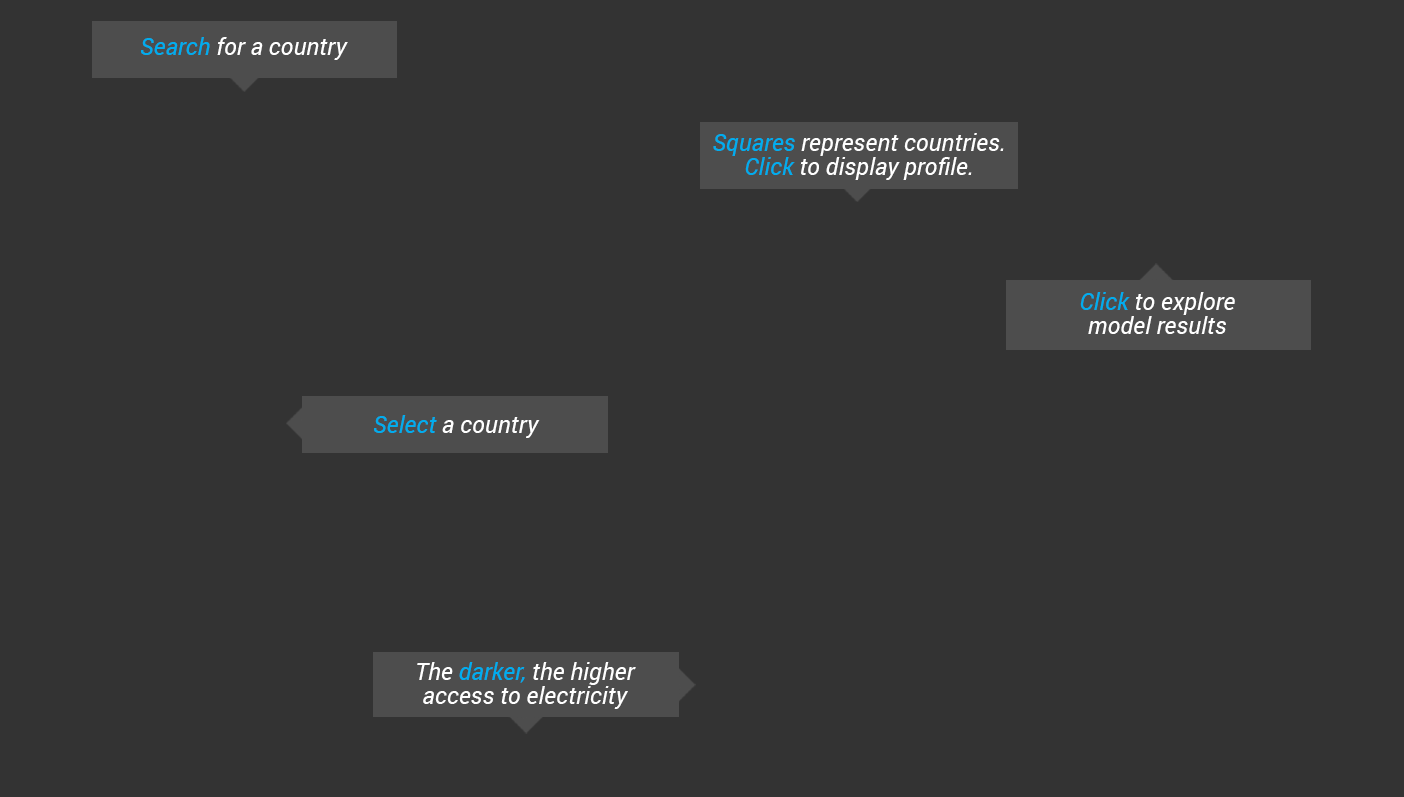
<style>
.page{position:relative;width:1404px;height:797px;background:#333333}
.page>*{position:absolute;margin:0}
.t1{font:24px "Roboto-Italic";color:#ffffff}
.t2{font:24px "Roboto-Italic";color:#00adef}
.t3{font:24px/24px "Roboto-Italic";color:#ffffff}
.t4{font:24px/24px "Roboto-Italic";color:#00adef}
</style>
<div class="page">
<p class="t1" style="left:141px;top:37px;width:207px;height:23px"><span class="t2">Search</span> for a country</p>
<p class="t3" style="left:713px;top:133px;width:291px;height:47px;text-align:center"><span class="t4">Squares</span> represent countries.<br><span class="t4">Click</span> to display profile.</p>
<p class="t3" style="left:1080px;top:292px;width:155px;height:42px;text-align:center"><span class="t4">Click</span> to explore<br>model results</p>
<p class="t1" style="left:374px;top:415px;width:166px;height:23px"><span class="t2">Select</span> a country</p>
<p class="t3" style="left:417px;top:662px;width:219px;height:47px;text-align:center">The<span class="t4"> darker,</span> the higher<br>access to electricity</p>
</div>
